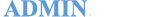
<style>
.page{position:relative;width:164px;height:17px;background:#ffffff}
.page>*{position:absolute;margin:0}
.t1{font:24px "TimesNewRomanPS-BoldMT";color:#5b9bd1}
</style>
<div class="page">
<p class="t1" style="left:3px;top:0px;width:84px;height:17px">ADMIN</p>
</div>
